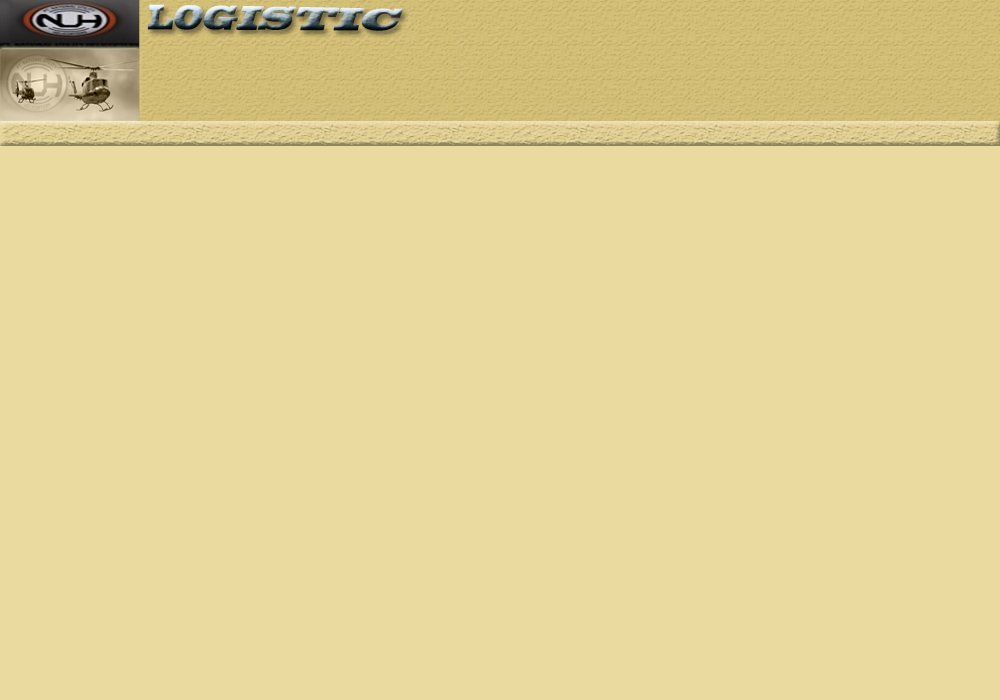
<style>
.page{position:relative;width:1000px;height:700px;background:#eadaa0}
.page>*{position:absolute;margin:0}
.t1{font:23px "BlackoakStd"}
.t2{font:12px "MyriadPro-Regular"}
</style>
<div class="page">
<p class="t1" style="left:147px;top:4px;width:257px;height:27px"><span class="t2"><br><br></span>LOGISTIC</p>
</div>
